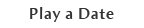
<style>
.page{position:relative;width:144px;height:28px;background:#ffffff}
.page>*{position:absolute;margin:0}
.t1{font:16px "AmiraParadiso";letter-spacing:0.05em;color:#333333}
</style>
<div class="page">
<p class="t1" style="left:30px;top:7px;width:84px;height:15px">Play a Date</p>
</div>
